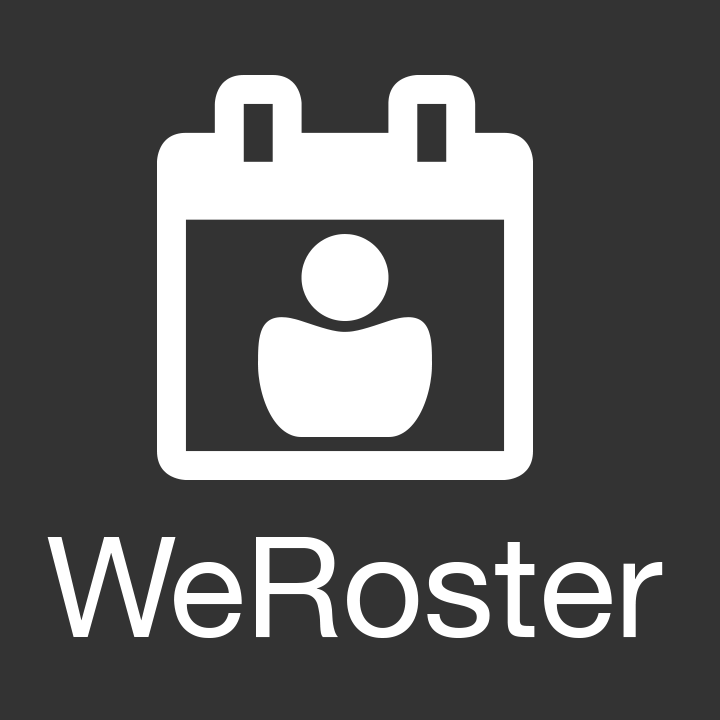
<style>
.page{position:relative;width:720px;height:720px;background:#333333}
.page>*{position:absolute;margin:0}
.t1{font:140.7px "HelveticaNeue";color:#ffffff}
</style>
<div class="page">
<p class="t1" style="left:47px;top:537px;width:616px;height:101px">WeRoster</p>
</div>
